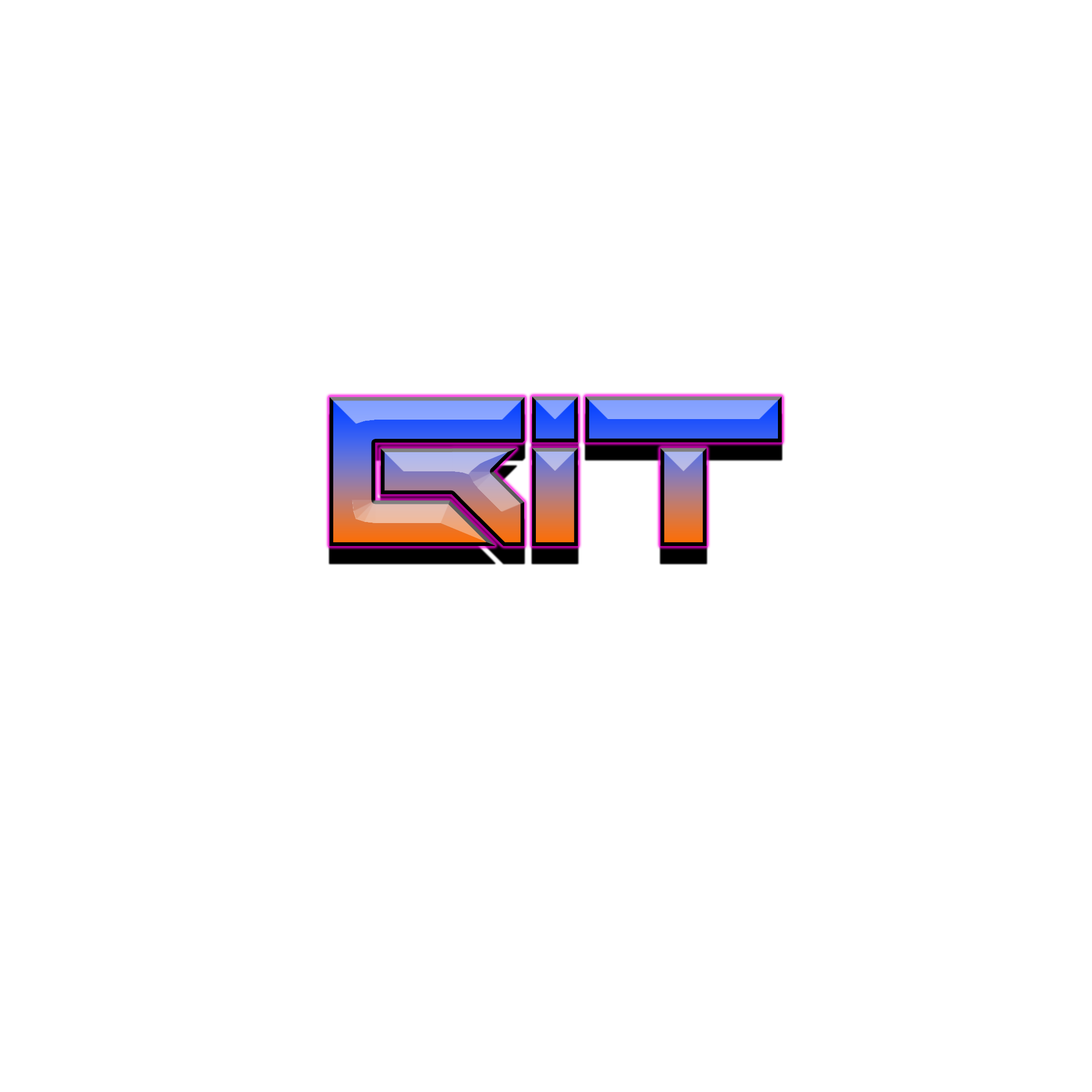
<style>
.page{position:relative;width:1092px;height:1092px;background:#ffffff}
.page>*{position:absolute;margin:0}
.t1{font:213.3px "Rektec"}
</style>
<div class="page">
<p class="t1" style="left:330px;top:396px;width:452px;height:150px">BIt</p>
</div>
